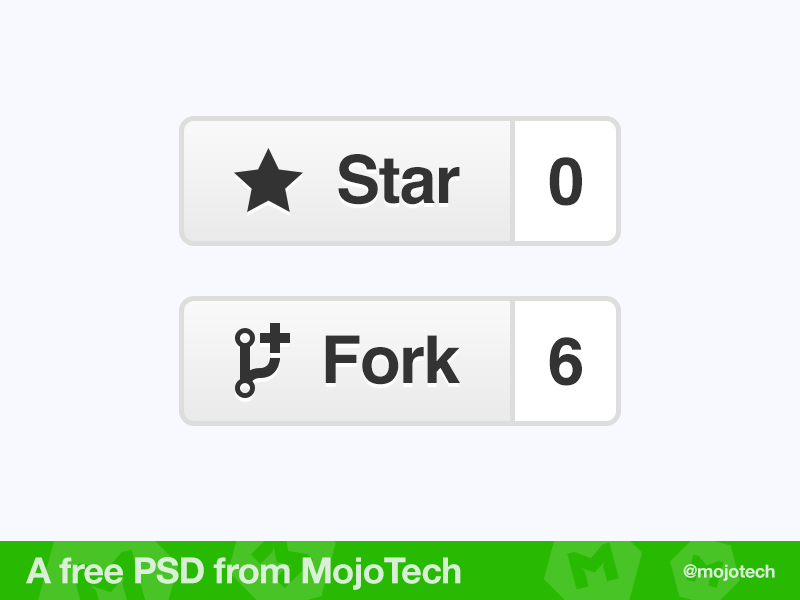
<style>
.page{position:relative;width:800px;height:600px;background:#f8f9fe}
.page>*{position:absolute;margin:0}
.t1{font:66px "Helvetica-Bold";letter-spacing:-0.02em;color:#333333}
.t2{font:36px "HelveticaNeue-Bold";letter-spacing:-0.02em;color:#d7efd4}
.t3{font:18px "HelveticaNeue-Bold";letter-spacing:-0.02em;color:#d7efd4}
</style>
<div class="page">
<p class="t1" style="left:338px;top:154px;width:122px;height:51px">Star</p>
<p class="t1" style="left:549px;top:157px;width:33px;height:49px">0</p>
<p class="t1" style="left:325px;top:335px;width:135px;height:50px">Fork</p>
<p class="t1" style="left:549px;top:337px;width:33px;height:49px">6</p>
<p class="t2" style="left:26px;top:557px;width:435px;height:33px">A free PSD from MojoTech</p>
<p class="t3" style="left:683px;top:564px;width:92px;height:17px">@mojotech</p>
</div>
